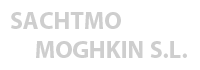
<style>
.page{position:relative;width:200px;height:70px;background:#ffffff}
.page>*{position:absolute;margin:0}
.t1{font:24.3px "MyriadPro-Bold";color:#cecece}
</style>
<div class="page">
<p class="t1" style="left:11px;top:12px;width:176px;height:46px">SACHTMO<br>     MOGHKIN S.L.</p>
</div>
